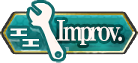
<style>
.page{position:relative;width:138px;height:63px;background:#ffffff}
.page>*{position:absolute;margin:0}
.t1{font:28px "RyuminPro-ExBold";letter-spacing:-0.16em;color:#fff6f2;scale:0.85 1}
</style>
<div class="page">
<p class="t1" style="left:57px;top:20px;width:65px;height:25px">Improv.</p>
</div>
